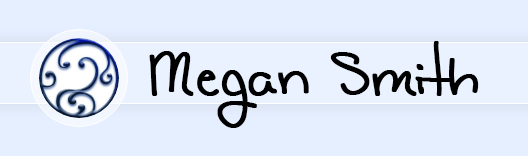
<style>
.page{position:relative;width:528px;height:156px;background:#e6efff}
.page>*{position:absolute;margin:0}
.t1{font:60px "CatholicSchoolGirlsBB";color:#000000;font-weight:bold}
.t2{font:60px "LunaBar";color:#000000;font-weight:bold}
</style>
<div class="page">
<p class="t1" style="left:149px;top:41px;width:330px;height:87px">Megan Sm<span class="t2">it</span>h</p>
</div>
